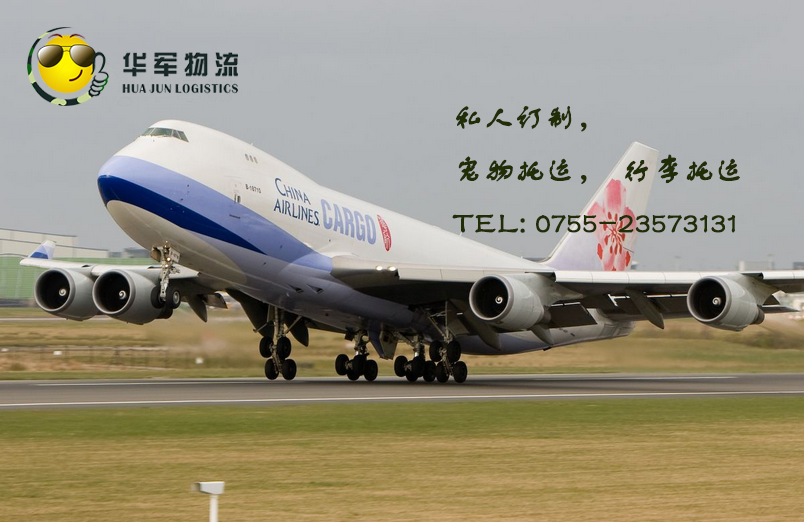
<style>
.page{position:relative;width:804px;height:522px}
.page>*{position:absolute;margin:0}
.t1{font:30px "FZSTK--GBK1-0";color:#202d07;font-weight:bold}
</style>
<div class="page">
<p class="t1" style="left:452px;top:106px;width:288px;height:127px">私人订制，<br>宠物托运，行李托运<br>TEL: 0755-23573131</p>
</div>
